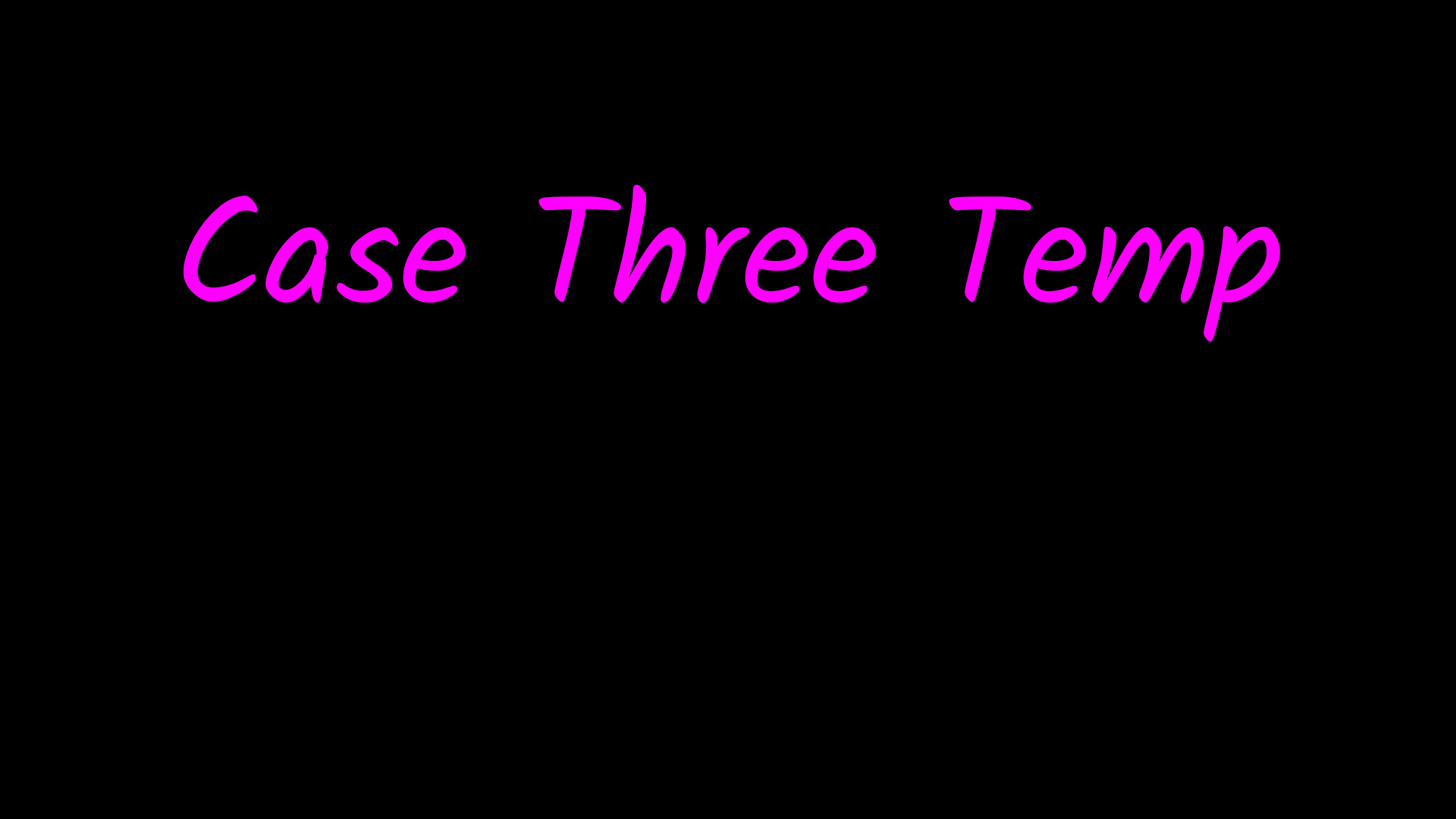
<style>
.page{position:relative;width:1456px;height:819px;background:#000000}
.page>*{position:absolute;margin:0}
.t1{font:151.7px "Kalam-Regular";color:#ff00ff}
</style>
<div class="page">
<p class="t1" style="left:184px;top:184px;width:1096px;height:158px">Case Three Temp</p>
</div>
